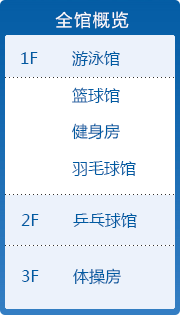
<style>
.page{position:relative;width:180px;height:315px;background:#ecf2fb}
.page>*{position:absolute;margin:0}
.t1{font:17px "MicrosoftYaHei";letter-spacing:0.1em;color:#ffffff}
.t2{font:16px "MicrosoftYaHei";color:#005ba2}
</style>
<div class="page">
<p class="t1" style="left:55px;top:11px;width:74px;height:18px">全馆概览</p>
<p class="t2" style="left:21px;top:52px;width:17px;height:12px">1F</p>
<p class="t2" style="left:72px;top:51px;width:48px;height:15px">游泳馆</p>
<p class="t2" style="left:72px;top:87px;width:48px;height:16px">篮球馆</p>
<p class="t2" style="left:72px;top:123px;width:48px;height:17px">健身房</p>
<p class="t2" style="left:72px;top:161px;width:64px;height:15px">羽毛球馆</p>
<p class="t2" style="left:21px;top:214px;width:18px;height:12px">2F</p>
<p class="t2" style="left:73px;top:213px;width:64px;height:15px">乒乓球馆</p>
<p class="t2" style="left:22px;top:270px;width:17px;height:12px">3F</p>
<p class="t2" style="left:73px;top:268px;width:48px;height:17px">体操房</p>
</div>
